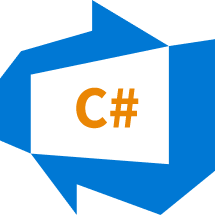
<style>
.page{position:relative;width:215px;height:215px;background:#ffffff}
.page>*{position:absolute;margin:0}
.t1{font:60px "SourceSansPro-Bold";color:#ea8604}
</style>
<div class="page">
<p class="t1" style="left:76px;top:87px;width:63px;height:42px">C#</p>
</div>
